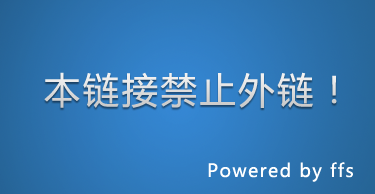
<style>
.page{position:relative;width:375px;height:194px}
.page>*{position:absolute;margin:0}
.t1{font:36px "MicrosoftYaHei";letter-spacing:0.08em;color:#dedede}
.t2{font:18px "MicrosoftYaHei";letter-spacing:0.08em;color:#ffffff}
</style>
<div class="page">
<p class="t1" style="left:44px;top:72px;width:293px;height:36px">本链接禁止外链！</p>
<p class="t2" style="left:208px;top:162px;width:145px;height:20px">Powered by ffs</p>
</div>
